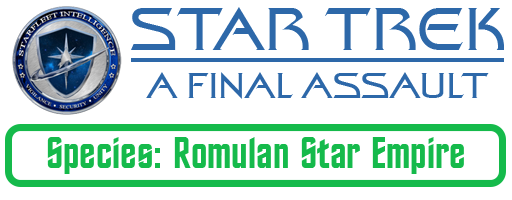
<style>
.page{position:relative;width:512px;height:200px;background:#ffffff}
.page>*{position:absolute;margin:0}
.t1{font:60px "StarTrekFilmBT-Regular";color:#2d68a9}
.t2{font:36px "StarTrekFilmBT-Regular";color:#2d68a9}
.t3{font:44px "StarTrekBT-Regular";color:#15ba4b}
</style>
<div class="page">
<p class="t1" style="left:131px;top:7px;width:373px;height:43px">STAR TREK</p>
<p class="t2" style="left:146px;top:72px;width:343px;height:27px">A FINAL ASSAULT</p>
<p class="t3" style="left:47px;top:137px;width:417px;height:37px">Species: Romulan Star Empire</p>
</div>
